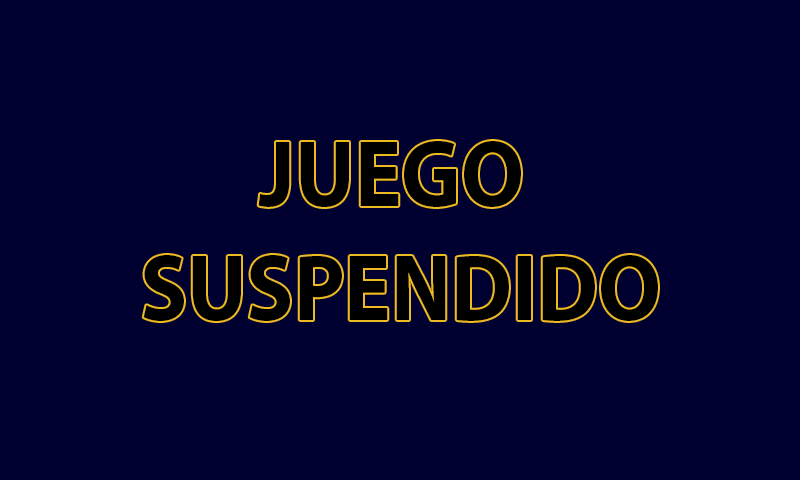
<style>
.page{position:relative;width:800px;height:480px;background:#000030}
.page>*{position:absolute;margin:0}
.t1{font:95.3px "MyriadPro-Bold";color:#000000;scale:0.92 1}
</style>
<div class="page">
<p class="t1" style="left:143px;top:141px;width:515px;height:180px;text-align:center">JUEGO <br>SUSPENDIDO</p>
</div>
